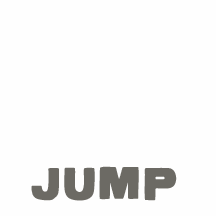
<style>
.page{position:relative;width:216px;height:216px;background:#fefefe}
.page>*{position:absolute;margin:0}
.t1{font:36px "AZPostcard";color:#6c6a64;font-weight:bold}
</style>
<div class="page">
<p class="t1" style="left:31px;top:166px;width:146px;height:35px">JUMP</p>
</div>
